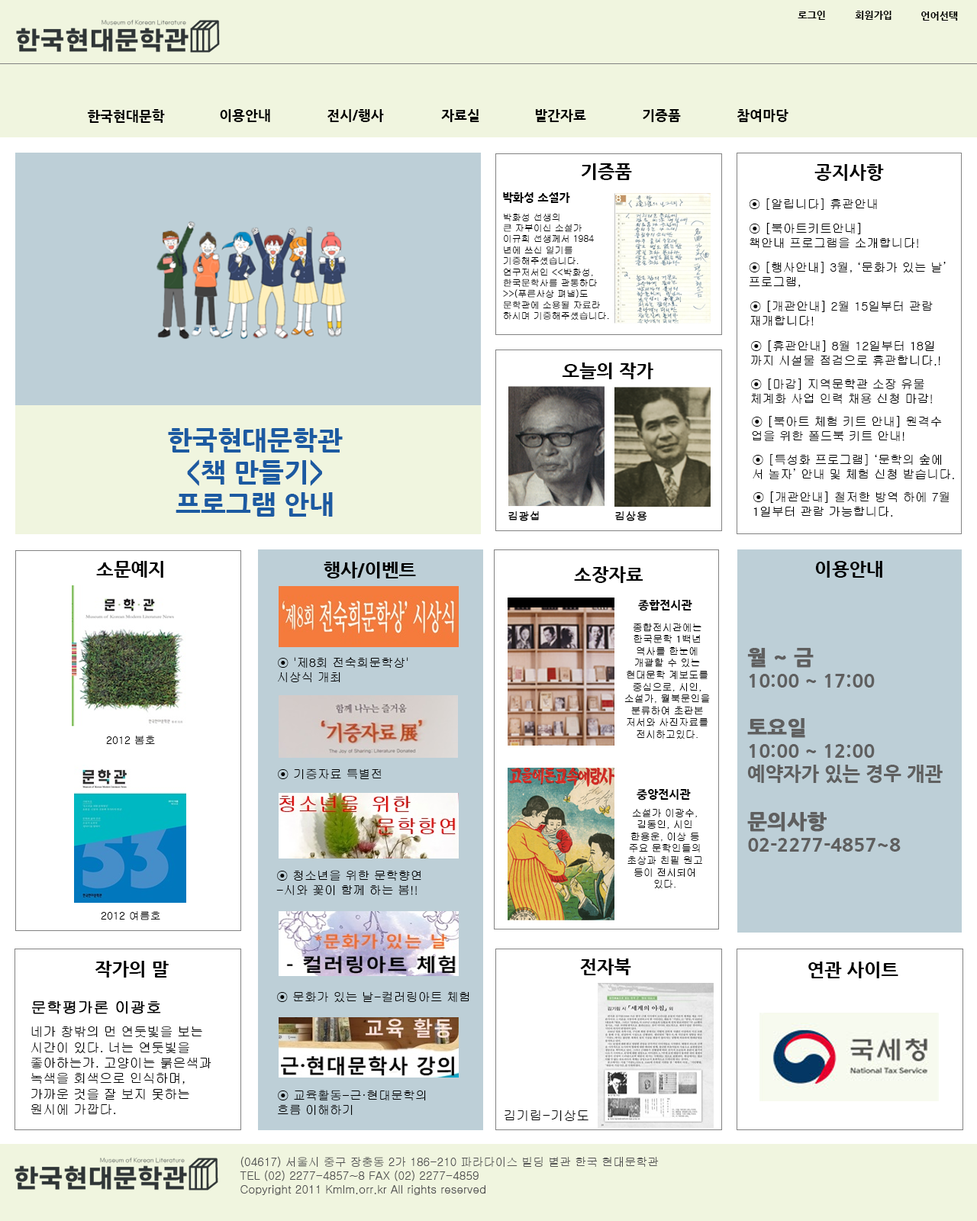
<style>
.page{position:relative;width:977px;height:1221px;background:#ffffff}
.page>*{position:absolute;margin:0}
.t1{font:9.9px "NanumGothicExtraBold";color:#000000}
.t2{font:13.7px "NanumGothicExtraBold";color:#000000}
.t3{font:18.3px "NanumGothicExtraBold";color:#000000}
.t4{font:11.4px "NanumGothicExtraBold";color:#000000}
.t5{font:12.2px "Gulim";color:#000000}
.t6{font:9.2px "Gulim";color:#000000}
.t7{font:26.7px "NanumGothicExtraBold";color:#1c5aa1}
.t8{font:10.7px "Gulim";color:#000000;font-weight:bold}
.t9{font:9.9px "Gulim";color:#000000}
.t10{font:19.1px "NanumGothicExtraBold";color:#5f5f5f}
.t11{font:20.6px "NanumGothicExtraBold";color:#5f5f5f;font-weight:bold}
.t12{font:10.7px "Gulim";color:#000000}
.t13{font:15.3px "Gulim";color:#000000;font-weight:bold}
.t14{font:13px "Gulim";color:#000000}
.t15{font:11.4px "Gulim";color:#525252}
</style>
<div class="page">
<p class="t1" style="left:797px;top:11px;width:28px;height:9px">로그인</p>
<p class="t1" style="left:855px;top:11px;width:36px;height:9px">회원가입</p>
<p class="t1" style="left:921px;top:11px;width:37px;height:10px">언어선택</p>
<p class="t2" style="left:87px;top:109px;width:78px;height:14px">한국현대문학</p>
<p class="t2" style="left:220px;top:109px;width:50px;height:13px">이용안내</p>
<p class="t2" style="left:327px;top:109px;width:57px;height:13px">전시/행사</p>
<p class="t2" style="left:441px;top:109px;width:38px;height:13px">자료실</p>
<p class="t2" style="left:535px;top:109px;width:51px;height:13px">발간자료</p>
<p class="t2" style="left:642px;top:109px;width:39px;height:13px">기증품</p>
<p class="t2" style="left:736px;top:109px;width:52px;height:13px">참여마당</p>
<p class="t3" style="left:581px;top:163px;width:51px;height:17px">기증품</p>
<p class="t3" style="left:814px;top:164px;width:70px;height:17px">공지사항</p>
<p class="t4" style="left:503px;top:192px;width:67px;height:11px">박화성 소설가</p>
<p class="t5" style="left:749px;top:198px;width:128px;height:12px">⊙ [알립니다] 휴관안내</p>
<p class="t6" style="left:503px;top:214px;width:106px;height:106px">박화성 선생의<br>큰 자부이신 소설가 이규희 선생께서 1984년에 쓰신 일기를 기증해주셨습니다.<br>연구저서인 &lt;&lt;박화성, 한국문학사를 관통하다&gt;&gt;(푸른사상 펴냄)도<br>문학관에 소용될 자료라 하시며 기증해주셨습니다.</p>
<p class="t5" style="left:749px;top:223px;width:169px;height:25px">⊙ [북아트키트안내]<br>책안내 프로그램을 소개합니다!</p>
<p class="t5" style="left:749px;top:262px;width:196px;height:26px">⊙ [행사안내] 3월, ‘문화가 있는 날’<br>프로그램,</p>
<p class="t5" style="left:750px;top:301px;width:182px;height:25px">⊙ [개관안내] 2월 15일부터 관람<br>재개합니다!</p>
<p class="t5" style="left:751px;top:340px;width:189px;height:26px">⊙ [휴관안내] 8월 12일부터 18일<br>까지 시설물 점검으로 휴관합니다.!</p>
<p class="t3" style="left:562px;top:362px;width:91px;height:17px">오늘의 작가</p>
<p class="t5" style="left:751px;top:378px;width:181px;height:26px">⊙ [마감] 지역문학관 소장 유물<br>체계화 사업 인력 채용 신청 마감!</p>
<p class="t5" style="left:752px;top:416px;width:190px;height:25px">⊙ [북아트 체험 키트 안내] 원격수<br>업을 위한 폴드북 키트 안내!</p>
<p class="t7" style="left:168px;top:428px;width:175px;height:89px;text-align:center">한국현대문학관<br>&lt;책 만들기&gt;<br>프로그램 안내</p>
<p class="t5" style="left:752px;top:454px;width:202px;height:25px">⊙ [특성화 프로그램] ‘문학의 숲에<br>서 놀자’ 안내 및 체험 신청 받습니다.</p>
<p class="t5" style="left:753px;top:491px;width:196px;height:26px">⊙ [개관안내] 철저한 방역 하에 7월<br>1일부터 관람 가능합니다.</p>
<p class="t8" style="left:508px;top:511px;width:31px;height:10px">김광섭</p>
<p class="t8" style="left:615px;top:511px;width:32px;height:10px">김상용</p>
<p class="t3" style="left:96px;top:561px;width:67px;height:17px">소문예지</p>
<p class="t3" style="left:324px;top:562px;width:92px;height:16px">행사/이벤트</p>
<p class="t3" style="left:574px;top:566px;width:69px;height:17px">소장자료</p>
<p class="t3" style="left:815px;top:561px;width:67px;height:17px">이용안내</p>
<p class="t4" style="left:638px;top:600px;width:54px;height:11px">종합전시관</p>
<p class="t9" style="left:624px;top:623px;width:86px;height:116px;text-align:center">종합전시관에는 한국문학 1백년 역사를 한눈에 개괄할 수 있는 현대문학 계보도를 중심으로, 시인, 소설가, 월북문인을 분류하여 초판본 저서와 사진자료를 전시하고있다.</p>
<p class="t10" style="left:747px;top:648px;width:195px;height:204px"><span class="t11">월 ~ 금 <br></span>10:00 ~ 17:00<br><br><span class="t11">토요일 <br></span>10:00 ~ 12:00<br>예약자가 있는 경우 개관<br><br><span class="t11">문의사항 <br></span>02-2277-4857~8</p>
<p class="t5" style="left:278px;top:657px;width:130px;height:25px">⊙ '제8회 전숙희문학상'<br>시상식 개최</p>
<p class="t12" style="left:106px;top:736px;width:49px;height:9px">2012 봄호</p>
<p class="t5" style="left:278px;top:768px;width:104px;height:11px">⊙ 기증자료 특별전</p>
<p class="t4" style="left:636px;top:789px;width:55px;height:11px">중앙전시관</p>
<p class="t9" style="left:627px;top:808px;width:75px;height:80px;text-align:center">소설가 이광수, 김동인, 시인 한용운, 이상 등 주요 문학인들의 초상과 친필 원고 등이 전시되어 있다.</p>
<p class="t5" style="left:276px;top:870px;width:145px;height:25px">⊙ 청소년을 위한 문학향연<br>-시와 꽃이 함께 하는 봄!!</p>
<p class="t12" style="left:101px;top:911px;width:59px;height:9px">2012 여름호</p>
<p class="t3" style="left:95px;top:961px;width:74px;height:16px">작가의 말</p>
<p class="t3" style="left:580px;top:958px;width:51px;height:17px">전자북</p>
<p class="t3" style="left:808px;top:961px;width:90px;height:17px">연관 사이트</p>
<p class="t13" style="left:32px;top:1001px;width:129px;height:13px">문학평가론 이광호</p>
<p class="t5" style="left:277px;top:991px;width:192px;height:11px">⊙ 문화가 있는 날-컬러링아트 체험</p>
<p class="t14" style="left:31px;top:1026px;width:180px;height:89px">네가 창밖의 먼 연둣빛을 보는<br>시간이 있다. 너는 연둣빛을<br>좋아하는가. 고양이는 붉은색과<br>녹색을 회색으로 인식하며,<br>가까운 것을 잘 보지 못하는<br>원시에 가깝다.</p>
<p class="t5" style="left:278px;top:1090px;width:148px;height:25px">⊙ 교육활동-근·현대문학의<br>흐름 이해하기</p>
<p class="t14" style="left:504px;top:1110px;width:84px;height:11px">김기림-기상도</p>
<p class="t15" style="left:240px;top:1156px;width:419px;height:39px">(04617) 서울시 중구 장충동 2가 186-210 파라다이스 빌딩 별관 한국 현대문학관<br>TEL (02) 2277-4857~8 FAX (02) 2277-4859<br>Copyright 2011 Kmlm.orr.kr All rights reserved</p>
</div>
